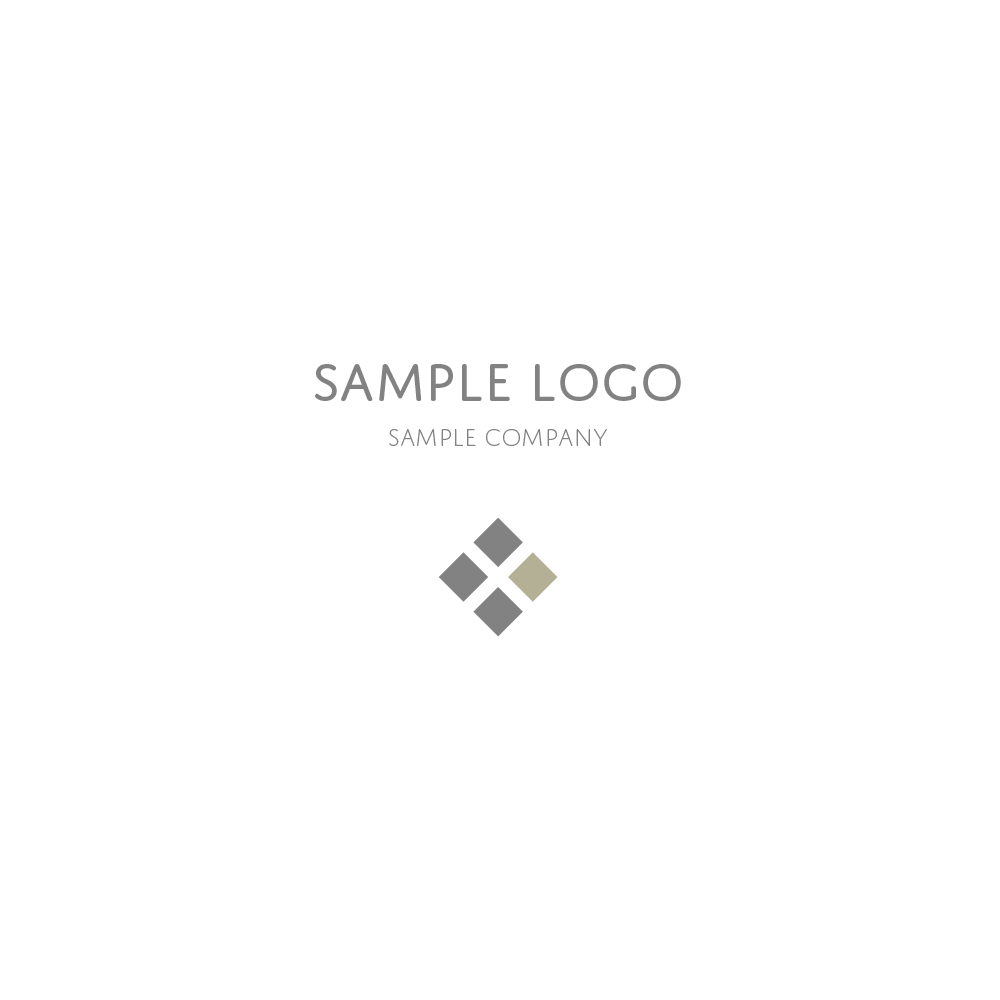
<style>
.page{position:relative;width:1000px;height:1000px;background:#ffffff}
.page>*{position:absolute;margin:0}
.t1{font:56px "DomusTitling";color:#828282}
.t2{font:25.2px "DomusTitlingExtralight";color:#828282}
</style>
<div class="page">
<p class="t1" style="left:315px;top:364px;width:366px;height:37px">sample LOGO</p>
<p class="t2" style="left:389px;top:429px;width:218px;height:17px">SAMPLE COMPANY</p>
</div>
